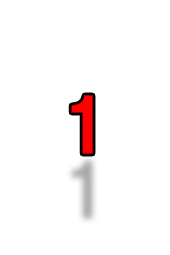
<style>
.page{position:relative;width:170px;height:255px;background:#ffffff}
.page>*{position:absolute;margin:0}
.t1{font:72px "HGSSoeiKakugothicUB";color:#ff0000}
</style>
<div class="page">
<p class="t1" style="left:71px;top:95px;width:22px;height:59px">1</p>
</div>
